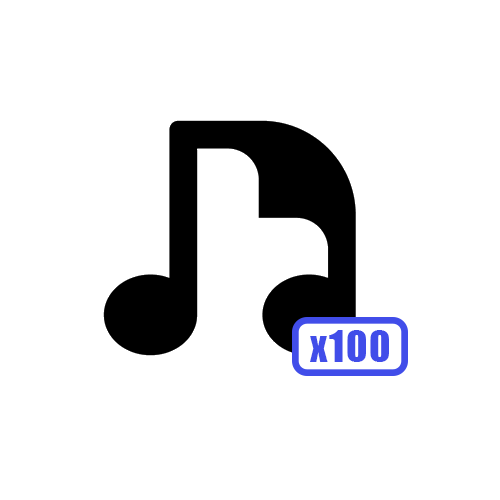
<style>
.page{position:relative;width:500px;height:500px;background:#ffffff}
.page>*{position:absolute;margin:0}
.t1{font:40px "Impact";letter-spacing:0.04em;color:#414de9}
</style>
<div class="page">
<p class="t1" style="left:310px;top:330px;width:79px;height:32px">x100</p>
</div>
